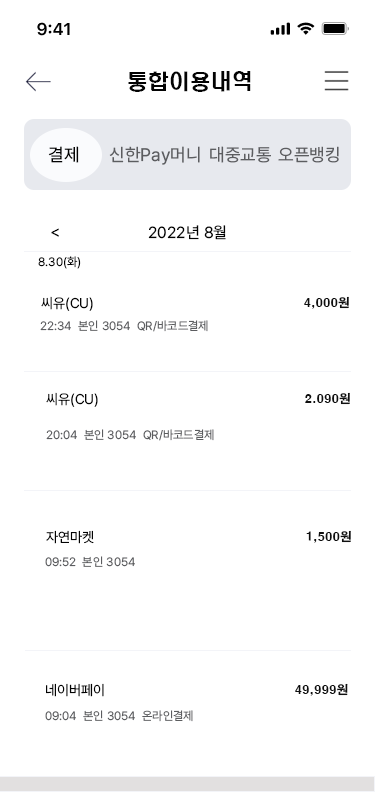
<style>
.page{position:relative;width:375px;height:812px;background:#ffffff}
.page>*{position:absolute;margin:0}
.t1{font:21px "H2hdrM";color:#030303}
.t2{font:18px "Pretendard-Regular";color:#030303}
.t3{font:18px "Pretendard-Regular";color:#5c5d60}
.t4{font:16px "Pretendard-Regular";color:#030303}
.t5{font:12px "Pretendard-Regular";color:#030303}
.t6{font:14px "Pretendard-Regular";color:#030303}
.t7{font:12px "H2gtrE";color:#0f0f0f}
.t8{font:12px "Pretendard-Regular";color:#5c5d60}
</style>
<div class="page">
<p class="t1" style="left:128px;top:71px;width:123px;height:21px">통합이용내역</p>
<p class="t2" style="left:48px;top:146px;width:31px;height:17px">결제</p>
<p class="t3" style="left:109px;top:146px;width:91px;height:19px">신한Pay머니</p>
<p class="t3" style="left:210px;top:146px;width:61px;height:17px">대중교통</p>
<p class="t3" style="left:278px;top:146px;width:61px;height:17px">오픈뱅킹</p>
<p class="t4" style="left:51px;top:228px;width:8px;height:9px">&lt;</p>
<p class="t4" style="left:148px;top:225px;width:78px;height:15px">2022년 8월</p>
<p class="t5" style="left:38px;top:256px;width:43px;height:13px">8.30(화)</p>
<p class="t6" style="left:41px;top:296px;width:52px;height:15px">씨유(CU)</p>
<p class="t7" style="left:304px;top:296px;width:45px;height:13px">4,000원</p>
<p class="t8" style="left:40px;top:320px;width:168px;height:12px">22:34  본인 3054  QR/바코드결제</p>
<p class="t6" style="left:46px;top:392px;width:52px;height:15px">씨유(CU)</p>
<p class="t7" style="left:305px;top:392px;width:45px;height:13px">2.090원</p>
<p class="t8" style="left:46px;top:429px;width:168px;height:12px">20:04  본인 3054  QR/바코드결제</p>
<p class="t6" style="left:46px;top:530px;width:48px;height:14px">자연마켓</p>
<p class="t7" style="left:306px;top:530px;width:45px;height:13px">1,500원</p>
<p class="t8" style="left:45px;top:556px;width:90px;height:11px">09:52  본인 3054</p>
<p class="t6" style="left:46px;top:683px;width:58px;height:14px">네이버페이</p>
<p class="t7" style="left:295px;top:683px;width:53px;height:13px">49,999원</p>
<p class="t8" style="left:45px;top:710px;width:148px;height:12px">09:04  본인 3054  온라인결제</p>
</div>
